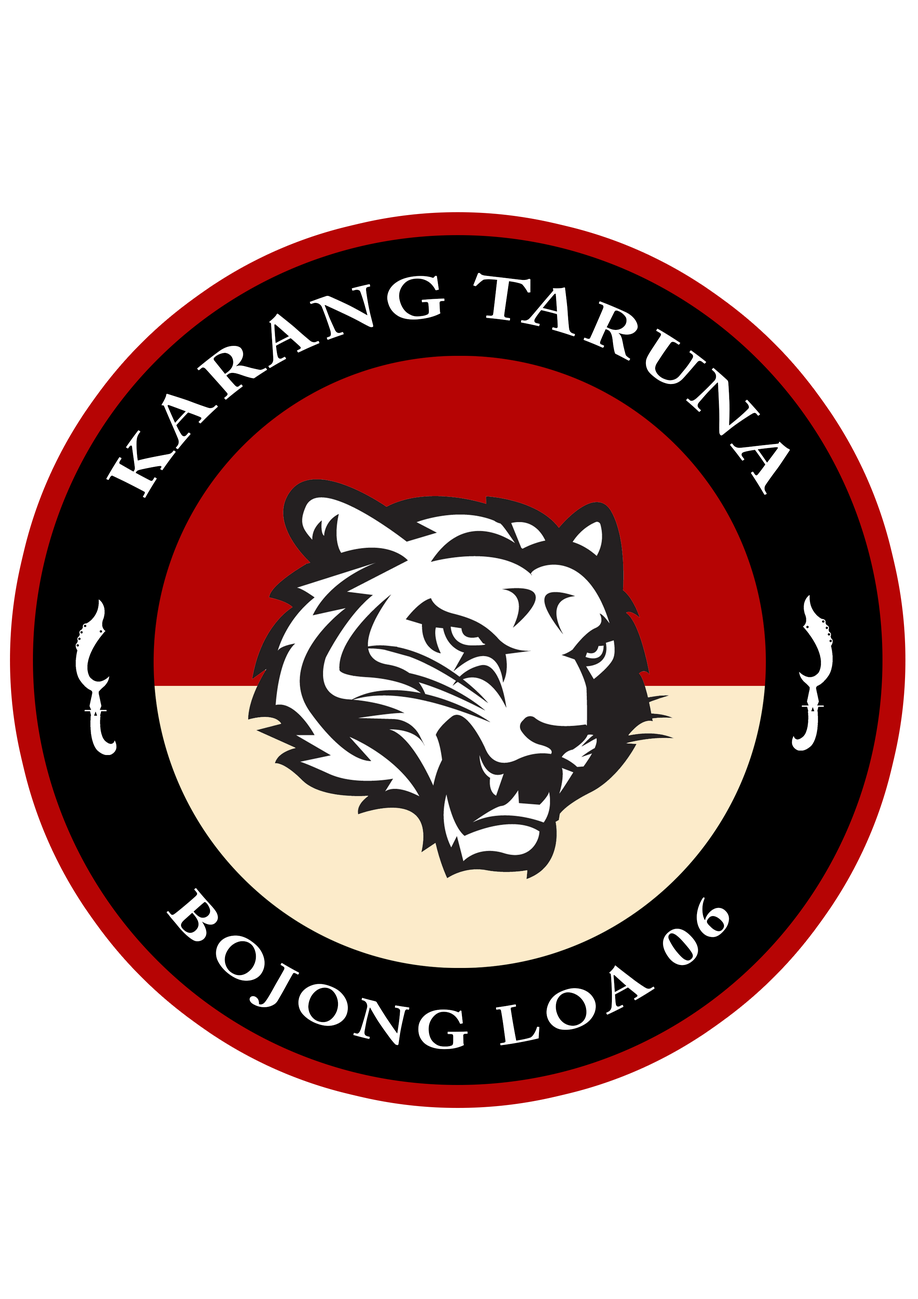
<style>
.page{position:relative;width:918px;height:1299px;background:#ffffff}
.page>*{position:absolute;margin:0}
.t1{font:54px "ACaslonPro-Bold";letter-spacing:0.1em;color:#ffffff}
</style>
<div class="page">
<p class="t1" style="left:106px;top:273px;width:684px;height:225px">KARANG TARUNA</p>
<p class="t1" style="left:167px;top:888px;width:562px;height:161px">BOJONG LOA 06</p>
</div>
